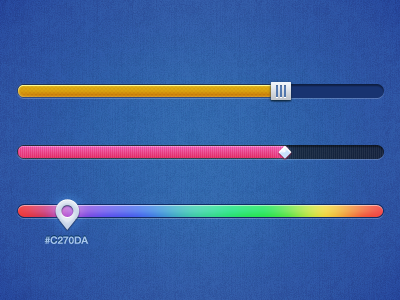
<style>
.page{position:relative;width:400px;height:300px}
.page>*{position:absolute;margin:0}
.t1{font:10px "HelveticaNeue-Medium";color:#a7c6ef}
</style>
<div class="page">
<p class="t1" style="left:44px;top:236px;width:45px;height:8px">#C270DA</p>
</div>
